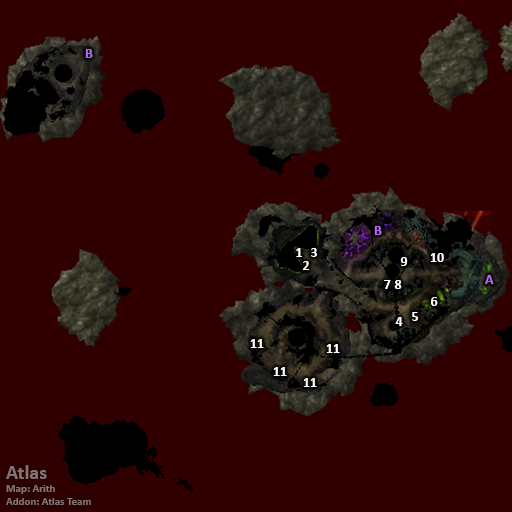
<style>
.page{position:relative;width:512px;height:512px;background:#300000}
.page>*{position:absolute;margin:0}
.t1{font:14px "Calibri-Bold";color:#bb66ff}
.t2{font:14px "Calibri-Bold";color:#ffffff}
.t3{font:11px "Calibri-Bold";color:#847474}
.t4{font:20px "Calibri-Bold";color:#847474}
</style>
<div class="page">
<p class="t1" style="left:85px;top:49px;width:8px;height:9px">B</p>
<p class="t1" style="left:374px;top:226px;width:8px;height:9px">B</p>
<p class="t2" style="left:296px;top:248px;width:6px;height:9px">1</p>
<p class="t2" style="left:311px;top:248px;width:6px;height:9px">3</p>
<p class="t2" style="left:400px;top:257px;width:8px;height:9px">9</p>
<p class="t2" style="left:430px;top:253px;width:14px;height:9px">10</p>
<p class="t2" style="left:303px;top:261px;width:7px;height:9px">2</p>
<p class="t2" style="left:384px;top:280px;width:7px;height:9px">7</p>
<p class="t2" style="left:394px;top:280px;width:8px;height:9px">8</p>
<p class="t1" style="left:485px;top:275px;width:9px;height:9px">A</p>
<p class="t2" style="left:431px;top:297px;width:7px;height:9px">6</p>
<p class="t2" style="left:395px;top:317px;width:8px;height:9px">4</p>
<p class="t2" style="left:412px;top:312px;width:6px;height:9px">5</p>
<p class="t2" style="left:250px;top:339px;width:14px;height:9px">11</p>
<p class="t2" style="left:326px;top:344px;width:14px;height:9px">11</p>
<p class="t2" style="left:273px;top:367px;width:14px;height:9px">11</p>
<p class="t2" style="left:303px;top:378px;width:14px;height:9px">11</p>
<p class="t3" style="left:6px;top:465px;width:85px;height:40px"><span class="t4">Atlas<br></span>Map: Arith<br>Addon: Atlas Team</p>
</div>
